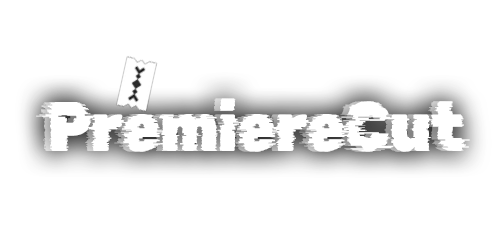
<style>
.page{position:relative;width:500px;height:250px;background:#ffffff}
.page>*{position:absolute;margin:0}
.t1{font:70px "RubikGlitch-Regular";letter-spacing:-0.02em;color:#ffffff;scale:0.9 1}
</style>
<div class="page">
<p class="t1" style="left:36px;top:98px;width:428px;height:54px">PremiereCut</p>
<p class="t1" style="left:42px;top:98px;width:428px;height:54px">PremiereCut</p>
</div>
